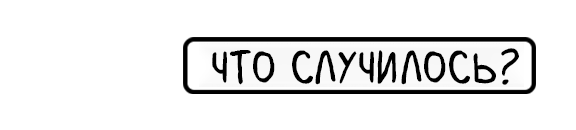
<style>
.page{position:relative;width:576px;height:130px;background:#ffffff}
.page>*{position:absolute;margin:0}
.t1{font:50px "MilkMustacheBB";color:#000000}
</style>
<div class="page">
<p class="t1" style="left:212px;top:48px;width:307px;height:37px">что случилось?</p>
</div>
